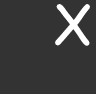
<style>
.page{position:relative;width:96px;height:94px;background:#333333}
.page>*{position:absolute;margin:0}
.t1{font:53px "ComicSansMS";color:#ffffff}
</style>
<div class="page">
<p class="t1" style="left:55px;top:4px;width:35px;height:42px">X</p>
</div>
